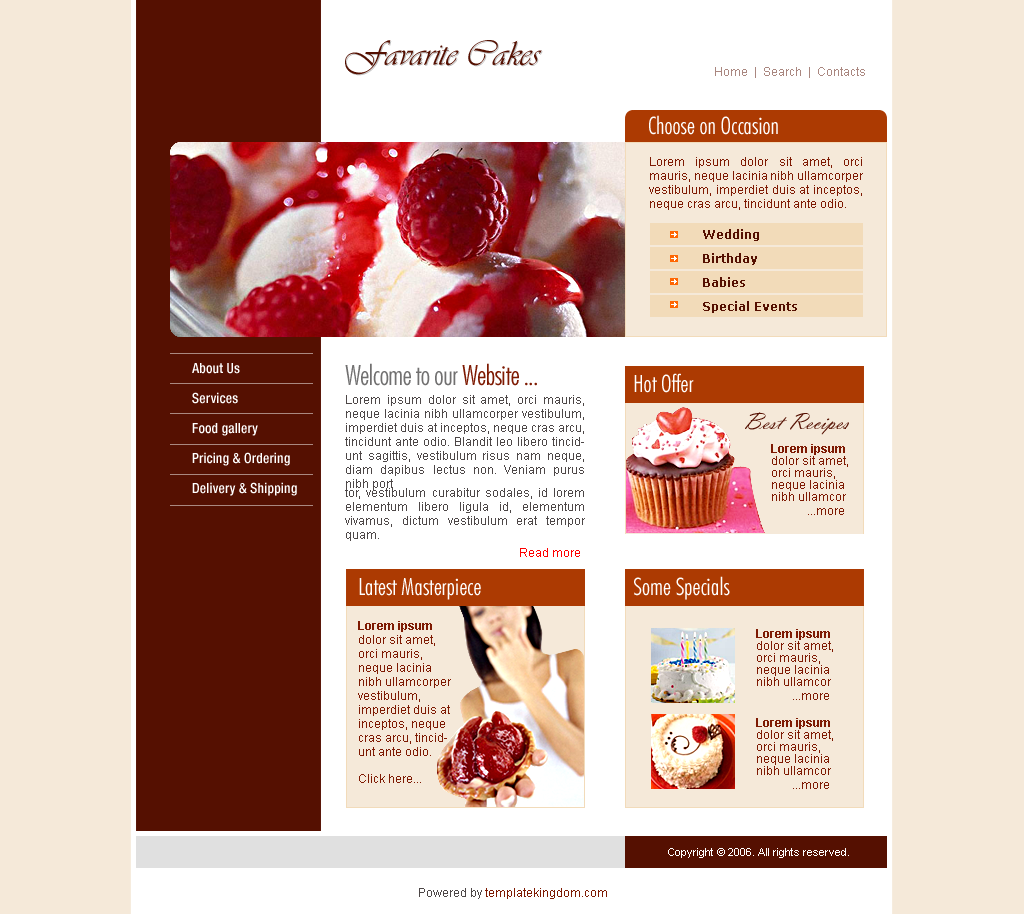
<style>
.page{position:relative;width:1024px;height:914px;background:#f5e9d9}
.page>*{position:absolute;margin:0}
.t1{font:36px "Vivaldii";color:#551001}
.t2{font:36px "Vivaldii"}
.t3{font:12px "ArialMT";color:#aa8780}
.t4{font:24px "FuturaBT-LightCondensed";color:#ffffff}
.t5{font:12px/14px "ArialMT";color:#7e1a02}
.t6{font:12px/24px "Verdana-Bold";color:#551001}
.t7{font:14px/30px "HelveticaNeue-MediumCond";color:#ffffff}
.t8{font:28px "FuturaBT-LightCondensed";letter-spacing:-0.025em;color:#717070}
.t9{font:28px "FuturaBT-LightCondensed";letter-spacing:-0.025em;color:#7e1a02}
.t10{font:12px/14px "ArialMT";color:#4d4747}
.t11{font:12px/14px "ArialMT";color:#ff0000}
.t12{font:24px "VladimirScrD";color:#551001}
.t13{font:12px/12px "ArialMT";color:#7e1a02}
.t14{font:12px/12px "Arial-BoldMT";color:#7e1a02}
.t15{font:12px/14px "Arial-BoldMT";color:#7e1a02}
.t16{font:11px "ArialMT";color:#ffffff}
.t17{font:12px "ArialMT";color:#7e1a02}
.t18{font:12px "ArialMT";color:#4d4747}
</style>
<div class="page">
<p class="t1" style="left:345px;top:40px;width:197px;height:35px">Favarite Cakes</p>
<p class="t2" style="left:346px;top:41px;width:197px;height:35px">Favarite Cakes</p>
<p class="t3" style="left:715px;top:67px;width:150px;height:11px">Home  |  Search  |  Contacts</p>
<p class="t4" style="left:649px;top:115px;width:129px;height:20px">Choose on Occasion</p>
<p class="t5" style="left:649px;top:157px;width:214px;height:53px;text-align:justify">Lorem ipsum dolor sit amet, orci mauris, neque lacinia nibh ullamcorper vestibulum, imperdiet duis at inceptos, neque cras arcu, tincidunt ante odio.</p>
<p class="t6" style="left:703px;top:229px;width:94px;height:84px">Wedding<br>Birthday<br>Babies<br>Special Events</p>
<p class="t7" style="left:192px;top:363px;width:105px;height:133px">About Us<br>Services<br>Food gallery <br>Pricing &amp; Ordering<br>Delivery &amp; Shipping</p>
<p class="t8" style="left:345px;top:363px;width:192px;height:23px">Welcome to our <span class="t9">Website ...</span></p>
<p class="t4" style="left:634px;top:373px;width:60px;height:20px">Hot Offer</p>
<p class="t10" style="left:345px;top:395px;width:240px;height:162px;text-align:justify">Lorem ipsum dolor sit amet, orci mauris, neque lacinia nibh ullamcorper vestibulum, imperdiet duis at inceptos, neque cras arcu, tincidunt ante odio. Blandit leo libero tincidunt sagittis, vestibulum risus nam neque, diam dapibus lectus non. Veniam purus nibh port<br>tor, vestibulum curabitur sodales, id lorem elementum libero ligula id, elementum vivamus, dictum vestibulum erat tempor quam. <br><br>              <span class="t11">Read more</span></p>
<p class="t12" style="left:745px;top:412px;width:104px;height:23px">Best Recipes</p>
<p class="t13" style="left:771px;top:444px;width:77px;height:71px"><span class="t14">Lorem ipsum </span>dolor sit amet, orci mauris, neque lacinia nibh ullamcor<br><br> ...more</p>
<p class="t4" style="left:359px;top:578px;width:122px;height:22px">Latest Masterpiece</p>
<p class="t4" style="left:634px;top:576px;width:96px;height:24px">Some Specials</p>
<p class="t5" style="left:358px;top:621px;width:93px;height:162px"><span class="t15">Lorem ipsum</span> dolor sit amet, orci mauris, neque lacinia nibh ullamcorper vestibulum, imperdiet duis at inceptos, neque cras arcu, tincidunt ante odio. <br><br><br>Click here...</p>
<p class="t13" style="left:756px;top:629px;width:77px;height:71px"><span class="t14">Lorem ipsum </span>dolor sit amet, orci mauris, neque lacinia nibh ullamcor<br><br> ...more</p>
<p class="t13" style="left:756px;top:718px;width:77px;height:71px"><span class="t14">Lorem ipsum </span>dolor sit amet, orci mauris, neque lacinia nibh ullamcor<br><br> ...more</p>
<p class="t16" style="left:668px;top:848px;width:181px;height:10px">Copyright © 2006. All rights reserved.</p>
<p class="t17" style="left:419px;top:888px;width:188px;height:11px"><span class="t18">Powered by </span>templatekingdom.com</p>
</div>
